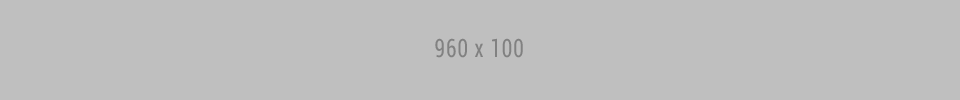
<style>
.page{position:relative;width:960px;height:100px;background:#bfbfbf}
.page>*{position:absolute;margin:0}
.t1{font:25px "Roboto-Condensed";letter-spacing:0.07em;color:#818181;scale:0.8 1}
</style>
<div class="page">
<p class="t1" style="left:435px;top:38px;width:88px;height:20px">960 x 100</p>
</div>
